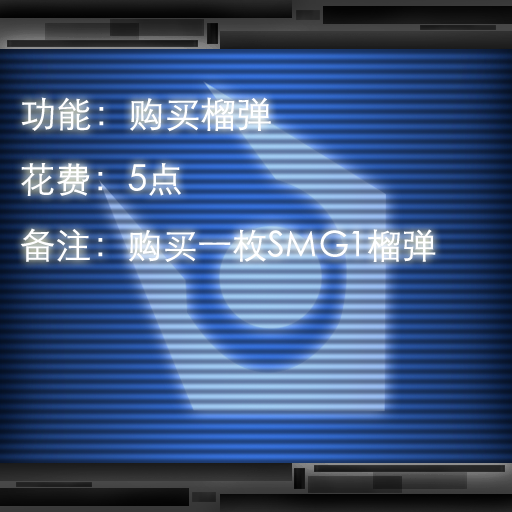
<style>
.page{position:relative;width:512px;height:512px}
.page>*{position:absolute;margin:0}
.t1{font:36px "STXihei";color:#ffffff}
.t2{font:35px "STXihei";color:#ffffff}
</style>
<div class="page">
<p class="t1" style="left:21px;top:97px;width:250px;height:35px">功能：购买榴弹</p>
<p class="t1" style="left:21px;top:163px;width:160px;height:33px">花费：5点</p>
<p class="t2" style="left:20px;top:228px;width:416px;height:34px"><span class="t1">备注：</span>购买一枚SMG1榴弹</p>
</div>
